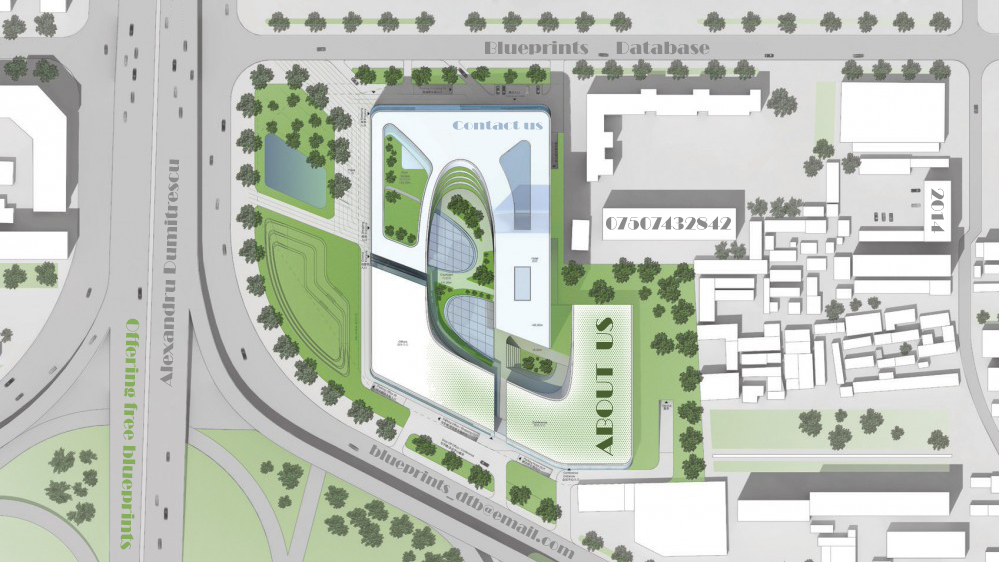
<style>
.page{position:relative;width:999px;height:562px}
.page>*{position:absolute;margin:0}
.t1{font:18.2px "Broadway";color:#8b8b8b}
.t2{font:12.5px "Broadway";color:#a3b9cf;scale:1.27 1}
.t3{font:18px "Broadway";color:#8b8b8b}
.t4{font:18.4px "Broadway";color:#8b8b8b}
.t5{font:18.4px "Broadway";color:#86ad5c}
.t6{font:24.9px "Broadway";color:#4a6030}
</style>
<div class="page">
<p class="t1" style="left:485px;top:41px;width:225px;height:14px">Blueprints      Database</p>
<p class="t2" style="left:452px;top:120px;width:91px;height:10px">Contact us</p>
<p class="t3" style="left:159px;top:159px;width:21px;height:228px;rotate:-88deg">Alexandru Dumitrescu</p>
<p class="t4" style="left:931px;top:188px;width:14px;height:45px;rotate:90deg">2014</p>
<p class="t1" style="left:606px;top:216px;width:125px;height:14px">07507432842</p>
<p class="t5" style="left:120px;top:318px;width:20px;height:232px;rotate:92deg">Offering free blueprints</p>
<p class="t6" style="left:595px;top:317px;width:18px;height:139px;rotate:-90deg">ABOUT  US</p>
</div>
